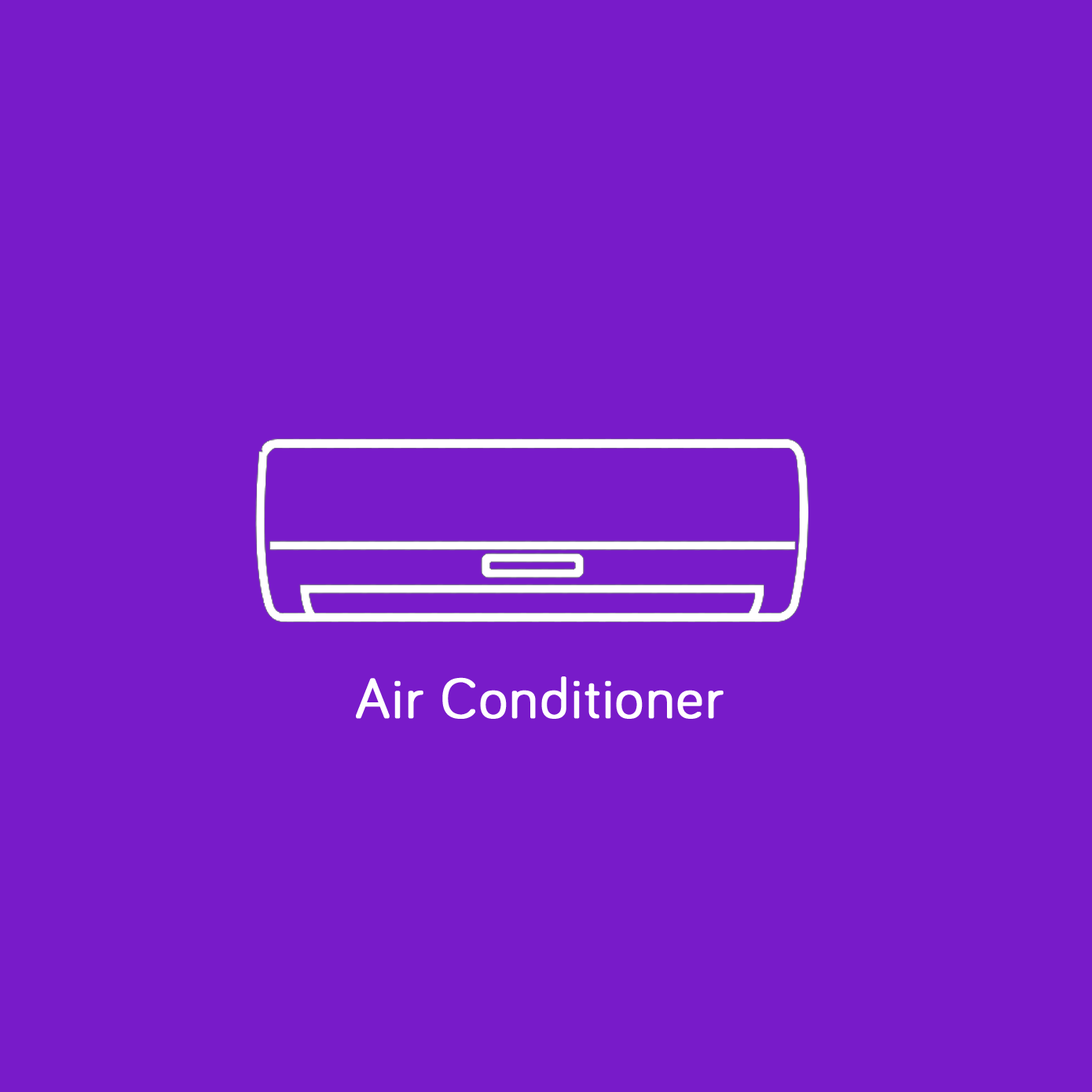
<style>
.page{position:relative;width:1092px;height:1092px;background:#781bc9}
.page>*{position:absolute;margin:0}
.t1{font:57.3px "Bariol-Regular";letter-spacing:0.01em;color:#ffffff;font-weight:bold}
</style>
<div class="page">
<p class="t1" style="left:356px;top:676px;width:368px;height:43px">Air Conditioner</p>
</div>
